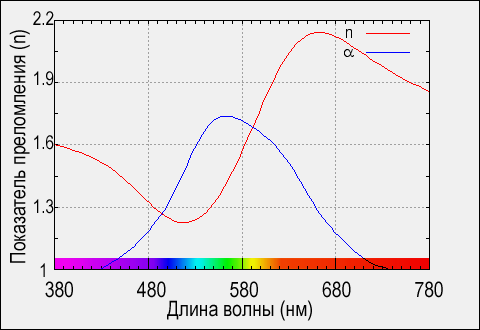
<style>
.page{position:relative;width:480px;height:330px;background:#f0f0f0}
.page>*{position:absolute;margin:0}
.t1{font:18.7px "ArialNarrow";color:#000000}
.t2{font:21.3px "ArialNarrow";color:#000000}
</style>
<div class="page">
<p class="t1" style="left:33px;top:11px;width:21px;height:266px;text-align:center">2.2<br><br><br>1.9<br><br><br>1.6<br><br><br>1.3<br><br><br>1</p>
<p class="t2" style="left:9px;top:30px;width:21px;height:233px;rotate:-90deg">Показатель преломления (n)</p>
<p class="t2" style="left:45px;top:281px;width:398px;height:17px">380             480             580             680             780</p>
<p class="t2" style="left:167px;top:300px;width:145px;height:21px">Длина волны (нм)</p>
</div>
